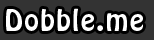
<style>
.page{position:relative;width:154px;height:40px;background:#333333}
.page>*{position:absolute;margin:0}
.t1{font:26px "HoboStd";letter-spacing:0.075em;color:#ffffff}
</style>
<div class="page">
<p class="t1" style="left:6px;top:8px;width:137px;height:23px">Dobble.me</p>
</div>
